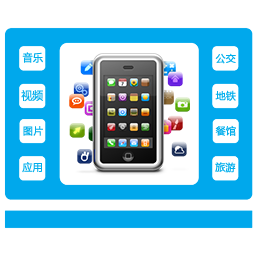
<style>
.page{position:relative;width:256px;height:256px;background:#ffffff}
.page>*{position:absolute;margin:0}
.t1{font:10.9px "MicrosoftYaHei";color:#00aeec;font-weight:bold;scale:0.92 1}
.t2{font:10px "MicrosoftYaHei";color:#00aeec;font-weight:bold}
.t3{font:11.3px "MicrosoftYaHei";color:#00aeec;font-weight:bold;scale:0.94 1}
</style>
<div class="page">
<p class="t1" style="left:22px;top:52px;width:21px;height:11px">音乐 音乐</p>
<p class="t2" style="left:215px;top:53px;width:21px;height:11px">公交</p>
<p class="t3" style="left:21px;top:90px;width:22px;height:12px">视频</p>
<p class="t2" style="left:215px;top:90px;width:21px;height:11px">地铁</p>
<p class="t2" style="left:23px;top:126px;width:20px;height:10px">图片</p>
<p class="t2" style="left:215px;top:125px;width:21px;height:11px">餐馆</p>
<p class="t2" style="left:22px;top:162px;width:20px;height:11px">应用</p>
<p class="t2" style="left:215px;top:162px;width:21px;height:11px">旅游</p>
</div>
